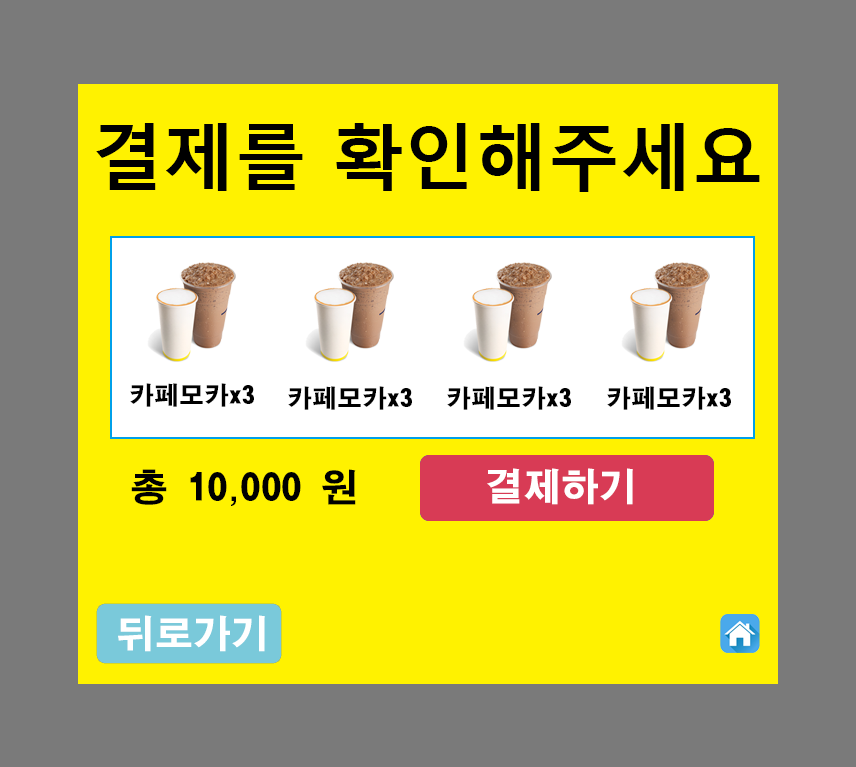
<style>
.page{position:relative;width:856px;height:767px;background:#7a7a7a}
.page>*{position:absolute;margin:0}
.t1{font:72px "MalgunGothicBold";color:#000000}
.t2{font:25px "ÈÞ¸Õ°ßÃâ°íµñ";color:#000000}
.t3{font:38px "ÈÞ¸Õ°ßÃâ°íµñ";color:#000000}
.t4{font:38px "ÈÞ¸Õ°ßÃâ°íµñ";color:#ffffff}
</style>
<div class="page">
<p class="t1" style="left:96px;top:123px;width:664px;height:69px">결제를 확인해주세요</p>
<p class="t2" style="left:130px;top:383px;width:124px;height:24px">카페모카x3</p>
<p class="t2" style="left:288px;top:386px;width:124px;height:24px">카페모카x3</p>
<p class="t2" style="left:447px;top:386px;width:124px;height:24px">카페모카x3</p>
<p class="t2" style="left:607px;top:386px;width:124px;height:24px">카페모카x3</p>
<p class="t3" style="left:131px;top:469px;width:225px;height:37px">총 10,000 원</p>
<p class="t4" style="left:487px;top:468px;width:146px;height:37px">결제하기</p>
<p class="t4" style="left:118px;top:615px;width:147px;height:37px">뒤로가기</p>
</div>
